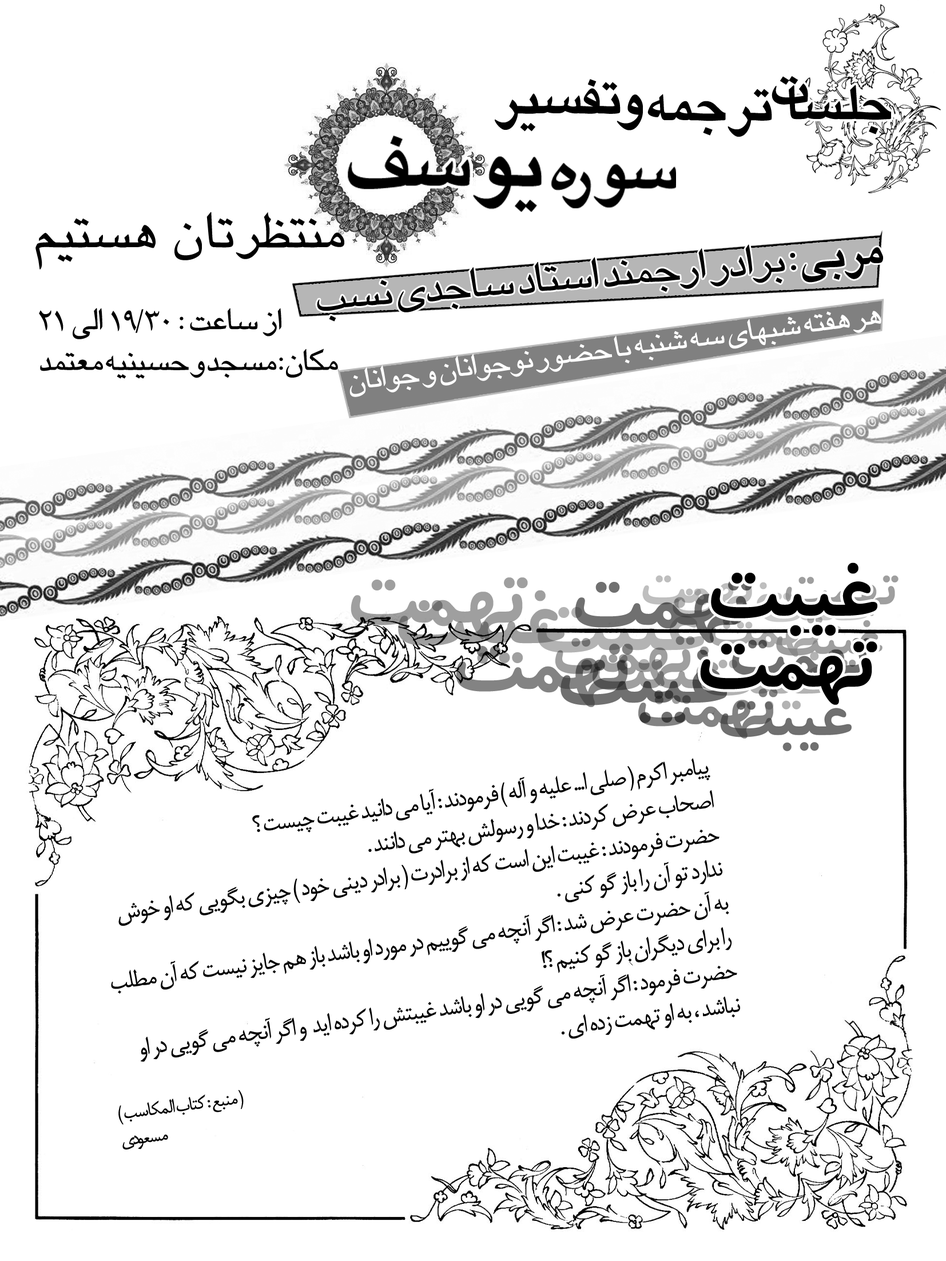
<style>
.page{position:relative;width:946px;height:1261px;background:#ffffff}
.page>*{position:absolute;margin:0}
.t1{font:57.2px "BYagut";color:#000000}
.t2{font:47.7px "BYagut";letter-spacing:-0.05em;color:#000000}
.t3{font:47.7px "BYagutBold";letter-spacing:-0.05em;color:#000000}
.t4{font:34px "BYagut";letter-spacing:-0.05em;color:#000000}
.t5{font:95.3px "BKoodakBold";letter-spacing:-0.05em;color:#000000}
.t6{font:28.6px "BMitra";letter-spacing:-0.05em;color:#000000}
.t7{font:22.2px "BMitra";letter-spacing:-0.05em;color:#000000}
</style>
<div class="page">
<p class="t1" style="left:35px;top:212px;width:309px;height:57px">منتظرتان هستيم</p>
<p class="t2" style="left:317px;top:244px;width:566px;height:77px;rotate:-5deg"><span class="t3">مربي </span>: برادر ارجمند استاد ساجدي نسب</p>
<p class="t4" style="left:39px;top:308px;width:299px;height:71px;text-align:right">از ساعت : 30/19 الي 21<br>مكان : مسجد و حسينيه معتمد</p>
<p class="t5" style="left:711px;top:562px;width:166px;height:74px">غيبت</p>
<p class="t5" style="left:700px;top:641px;width:177px;height:64px">تهمت</p>
<p class="t6" style="left:111px;top:758px;width:629px;height:392px;rotate:-7deg">پيامبر اكرم ( صلي ا... عليه و آله ) فرمودند : آيا مي دانيد غيبت چيست ؟<br>اصحاب عرض كردند : خدا و رسولش بهتر مي دانند .<br>حضرت فرمودند : غيبت اين است كه از برادرت ( برادر ديني خود ) چيزي بگويي كه او خوش ندارد تو آن را باز گو كني .<br>به آن حضرت عرض شد : اگر آنچه مي گوييم در مورد او باشد باز هم جايز نيست كه آن مطلب را براي ديگران باز گو كنيم ؟! <br>حضرت فرمود : اگر آنچه مي گويي در او باشد غيبتش را كرده ايد  و اگر آنچه مي گويي در او نباشد ، به او تهمت زده اي .<br><span class="t7">( منبع : كتاب المكاسب )<br>مسعودي</span></p>
</div>
